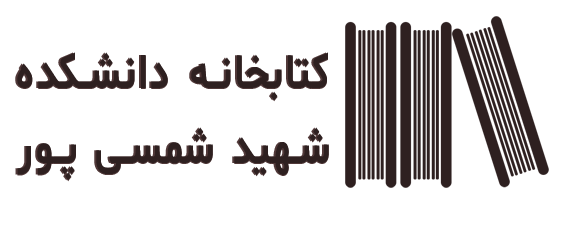
<style>
.page{position:relative;width:561px;height:235px;background:#ffffff}
.page>*{position:absolute;margin:0}
.t1{font:50.5px/75px "Shabnam-Bold";letter-spacing:0.076em;color:#2e2020;scale:0.76 1}
.t2{font:50.5px/75px "Shabnam-Bold";letter-spacing:0.1em;color:#2e2020;scale:0.76 1}
</style>
<div class="page">
<p class="t1" style="left:15px;top:52px;width:312px;height:129px;text-align:right">کتابخانه دانشکده<br><span class="t2"> شهید شمسی پور</span></p>
<p class="t1" style="left:17px;top:53px;width:312px;height:129px;text-align:right">کتابخانه دانشکده<br><span class="t2"> شهید شمسی پور</span></p>
<p class="t1" style="left:17px;top:52px;width:312px;height:129px;text-align:right">کتابخانه دانشکده<br><span class="t2"> شهید شمسی پور</span></p>
</div>
